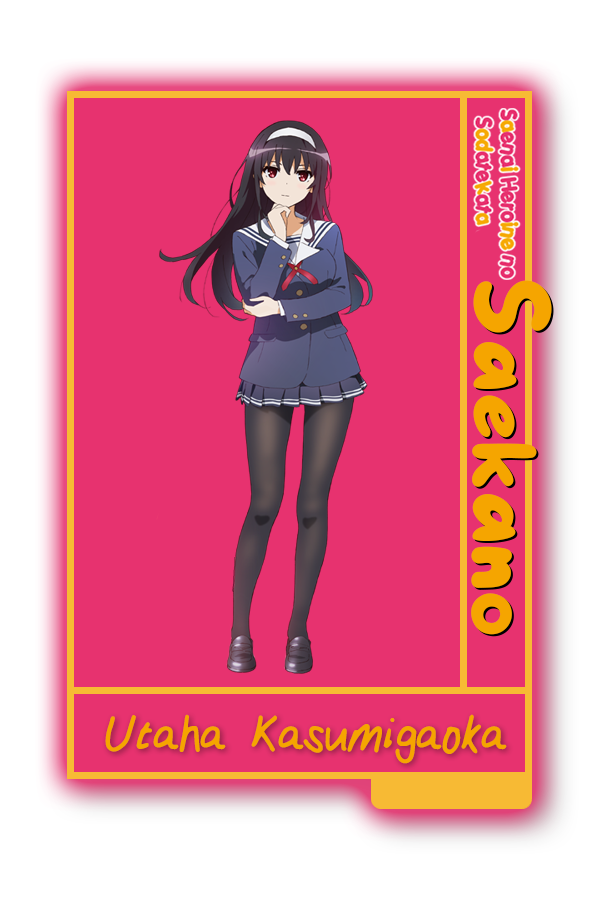
<style>
.page{position:relative;width:600px;height:900px;background:#e7326f}
.page>*{position:absolute;margin:0}
.t1{font:109.9px "Go-Mocha";color:#f5a500;scale:1.04 1}
.t2{font:62px "Girly_handwriting";color:#f5a500}
</style>
<div class="page">
<p class="t1" style="left:471px;top:280px;width:81px;height:355px;rotate:91deg">Saekano</p>
<p class="t2" style="left:105px;top:714px;width:402px;height:50px">Utaha Kasumigaoka</p>
</div>
